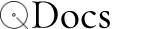
<style>
.page{position:relative;width:143px;height:29px;background:#ffffff}
.page>*{position:absolute;margin:0}
.t1{font:41.4px "CormorantGaramond-Regular";letter-spacing:0.01em;color:#000000}
</style>
<div class="page">
<p class="t1" style="left:32px;top:1px;width:78px;height:28px">Docs</p>
</div>
